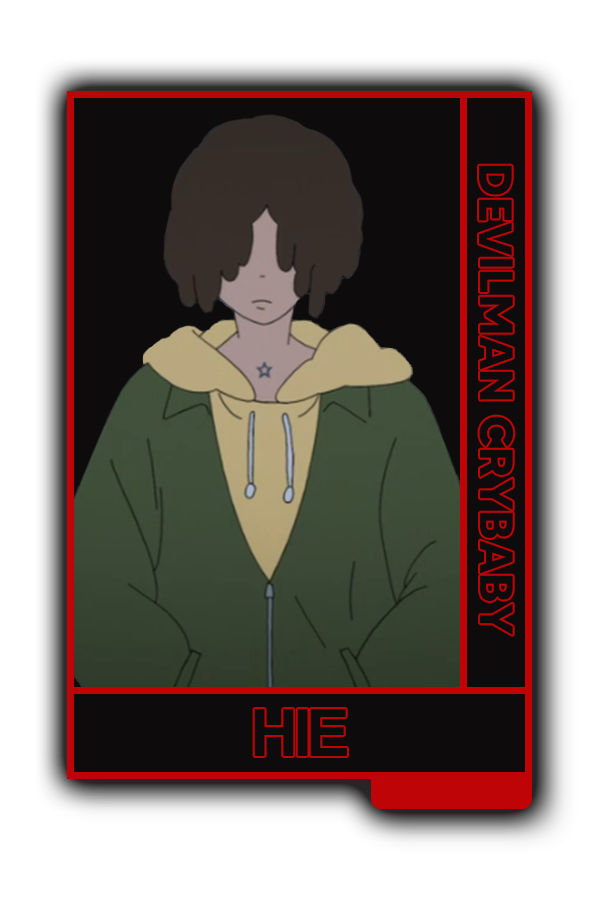
<style>
.page{position:relative;width:600px;height:900px;background:#0d0b0b}
.page>*{position:absolute;margin:0}
.t1{font:46.8px "MADETOMMY-Bold";color:#0d0b0b}
.t2{font:72.5px "CoolveticaRg-Regular";color:#0d0b0b}
</style>
<div class="page">
<p class="t1" style="left:479px;top:165px;width:35px;height:470px;rotate:90deg">DEVILMAN CRYBABY</p>
<p class="t2" style="left:254px;top:709px;width:93px;height:47px">HIE</p>
</div>
